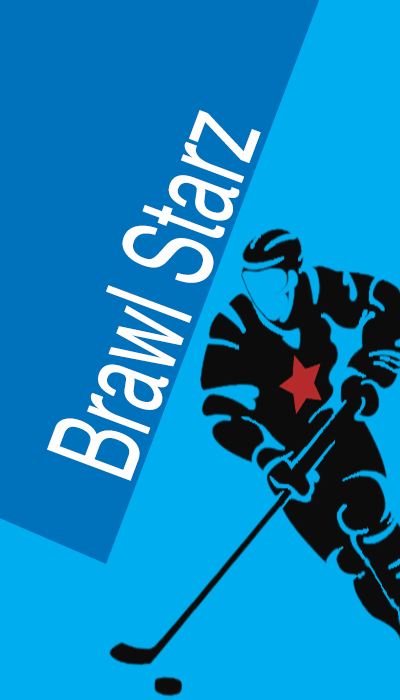
<style>
.page{position:relative;width:400px;height:700px;background:#00aef0}
.page>*{position:absolute;margin:0}
.t1{font:123.8px "Helvetica";color:#fefefe;scale:0.6 1}
</style>
<div class="page">
<p class="t1" style="left:47px;top:110px;width:214px;height:371px;rotate:-70deg">Brawl Starz</p>
</div>
